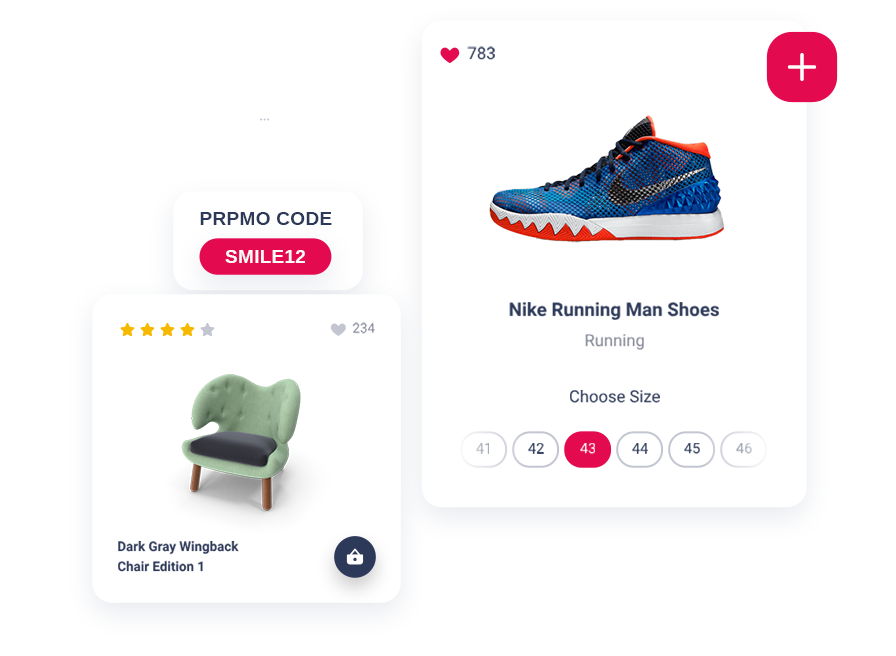
<style>
.page{position:relative;width:896px;height:656px;background:#ffffff}
.page>*{position:absolute;margin:0}
.t1{font:16.6px "Roboto-Regular";color:#343f5d}
.t2{font:19.5px "Arimo-Bold";color:#2d3958}
.t3{font:19.5px "Arimo-Bold";color:#fbfbfb}
.t4{font:18.7px "Roboto-Bold";color:#2d3958}
.t5{font:13.3px "Roboto-Regular";color:#858997}
.t6{font:16.6px "Roboto-Regular";color:#858997}
.t7{font:16.6px "Roboto-Regular";color:#2f3b59}
.t8{font:14.6px "Roboto-Regular";color:#acb1bd}
.t9{font:14.6px "Roboto-Regular";color:#2d3958}
.t10{font:14.6px "Roboto-Regular";color:#ffffff}
.t11{font:14.6px "Roboto-Regular";color:#303b5a}
.t12{font:14.6px "Roboto-Regular";color:#9ea4b2}
.t13{font:13.3px/20px "Roboto-Bold";color:#2d3958}
</style>
<div class="page">
<p class="t1" style="left:467px;top:46px;width:28px;height:14px">783</p>
<p class="t2" style="left:200px;top:212px;width:132px;height:13px">PRPMO CODE</p>
<p class="t3" style="left:225px;top:250px;width:80px;height:13px">SMILE12</p>
<p class="t4" style="left:509px;top:302px;width:210px;height:18px">Nike Running Man Shoes</p>
<p class="t5" style="left:352px;top:322px;width:23px;height:12px">234</p>
<p class="t6" style="left:585px;top:334px;width:59px;height:16px">Running</p>
<p class="t7" style="left:570px;top:390px;width:90px;height:13px">Choose Size</p>
<p class="t8" style="left:476px;top:443px;width:13px;height:11px">41</p>
<p class="t9" style="left:528px;top:443px;width:16px;height:11px">42</p>
<p class="t10" style="left:580px;top:443px;width:15px;height:11px">43</p>
<p class="t9" style="left:632px;top:443px;width:16px;height:11px">44</p>
<p class="t11" style="left:684px;top:443px;width:16px;height:11px">45</p>
<p class="t12" style="left:736px;top:443px;width:16px;height:11px">46</p>
<p class="t13" style="left:118px;top:541px;width:121px;height:31px">Dark Gray Wingback<br>Chair Edition 1</p>
</div>
